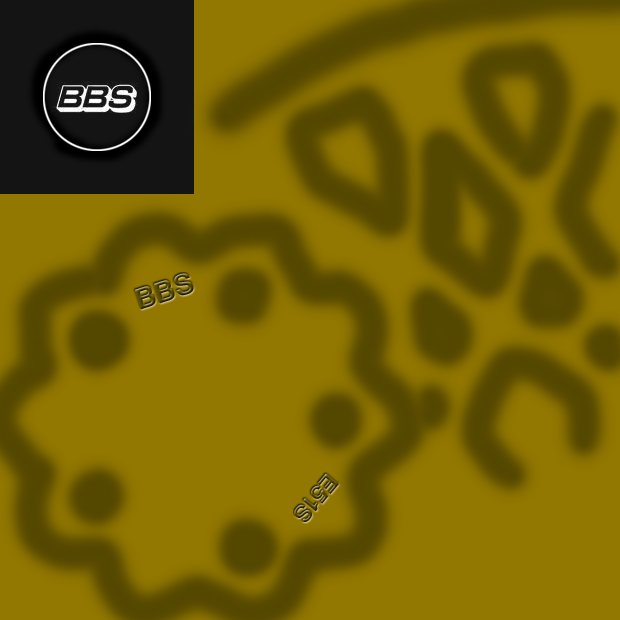
<style>
.page{position:relative;width:620px;height:620px;background:#927700}
.page>*{position:absolute;margin:0}
.t1{font:28.7px "HeldustryFTVBasic-Demi"}
.t2{font:23.3px "HeldustryFTVBasic-Demi"}
</style>
<div class="page">
<p class="t1" style="left:134px;top:273px;width:60px;height:37px;rotate:-18deg">BBS</p>
<p class="t2" style="left:294px;top:473px;width:45px;height:49px;rotate:130deg">e51s</p>
</div>
